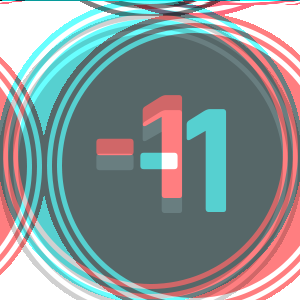
<style>
.page{position:relative;width:300px;height:300px;background:#566768}
.page>*{position:absolute;margin:0}
.t1{font:160px "Rajdhani-Bold"}
</style>
<div class="page">
<p class="t1" style="left:96px;top:94px;width:87px;height:103px">-1</p>
</div>
